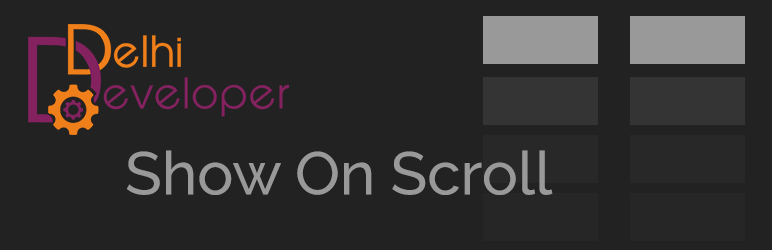
<style>
.page{position:relative;width:772px;height:250px;background:#222222}
.page>*{position:absolute;margin:0}
.t1{font:60.2px "Raleway-Medium";color:#999999}
</style>
<div class="page">
<p class="t1" style="left:126px;top:150px;width:427px;height:45px">Show On Scroll</p>
</div>
